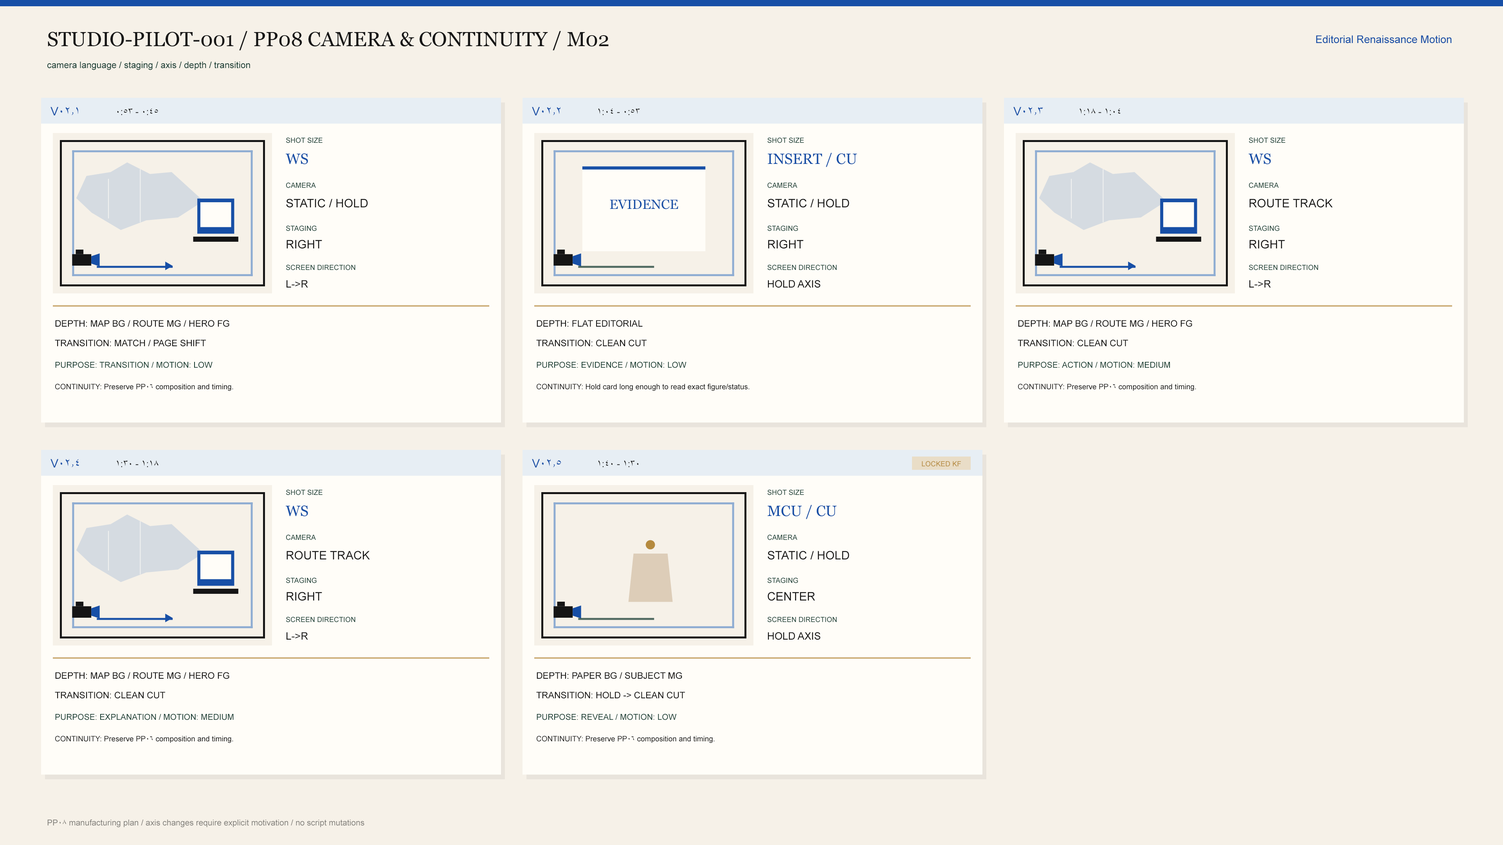
<style>
.page{position:relative;width:1503px;height:845px;background:#f6f1e8}
.page>*{position:absolute;margin:0}
.t1{font:20.3px "Georgia";color:#151515}
.t2{font:10.6px "ArialMT";color:#174fa6}
.t3{font:9px "ArialMT";color:#173c32}
.t4{font:11.7px "ArialMT";color:#174fa6}
.t5{font:9.4px "ArialMT";color:#151515}
.t6{font:7px "ArialMT";color:#173c32}
.t7{font:14.9px "Georgia";color:#174fa6}
.t8{font:11.7px "ArialMT";color:#151515}
.t9{font:13.3px "Georgia";color:#174fa6}
.t10{font:10.2px "ArialMT";color:#151515}
.t11{font:9px "ArialMT";color:#151515}
.t12{font:8.2px "ArialMT";color:#173c32}
.t13{font:7.4px "ArialMT";color:#151515}
.t14{font:7px "ArialMT";color:#b58a3e}
.t15{font:21.5px "ArialMT";color:#b58a3e}
.t16{font:8.2px "ArialMT";color:#817f7a}
</style>
<div class="page">
<p class="t1" style="left:48px;top:31px;width:560px;height:19px">STUDIO-PILOT-001 / PP08 CAMERA &amp; CONTINUITY / M02</p>
<p class="t2" style="left:1316px;top:35px;width:135px;height:8px">Editorial Renaissance Motion</p>
<p class="t3" style="left:47px;top:61px;width:203px;height:9px">camera language / staging / axis / depth / transition</p>
<p class="t4" style="left:50px;top:107px;width:28px;height:8px">V02.1</p>
<p class="t5" style="left:117px;top:108px;width:41px;height:7px">0:45 - 0:53</p>
<p class="t4" style="left:532px;top:107px;width:28px;height:8px">V02.2</p>
<p class="t5" style="left:598px;top:108px;width:42px;height:7px">0:53 - 1:04</p>
<p class="t4" style="left:1013px;top:107px;width:29px;height:8px">V02.3</p>
<p class="t5" style="left:1079px;top:108px;width:41px;height:7px">1:04 - 1:18</p>
<p class="t6" style="left:286px;top:137px;width:36px;height:6px">SHOT SIZE</p>
<p class="t6" style="left:767px;top:137px;width:37px;height:6px">SHOT SIZE</p>
<p class="t6" style="left:1249px;top:137px;width:36px;height:6px">SHOT SIZE</p>
<p class="t7" style="left:286px;top:153px;width:22px;height:11px">WS</p>
<p class="t7" style="left:767px;top:153px;width:90px;height:14px">INSERT / CU</p>
<p class="t7" style="left:1248px;top:153px;width:23px;height:11px">WS</p>
<p class="t6" style="left:286px;top:182px;width:30px;height:6px">CAMERA</p>
<p class="t6" style="left:767px;top:182px;width:30px;height:6px">CAMERA</p>
<p class="t6" style="left:1249px;top:182px;width:29px;height:6px">CAMERA</p>
<p class="t8" style="left:286px;top:199px;width:82px;height:9px">STATIC / HOLD</p>
<p class="t9" style="left:610px;top:200px;width:68px;height:9px">EVIDENCE</p>
<p class="t8" style="left:767px;top:199px;width:82px;height:9px">STATIC / HOLD</p>
<p class="t8" style="left:1249px;top:199px;width:83px;height:9px">ROUTE TRACK</p>
<p class="t6" style="left:286px;top:225px;width:31px;height:6px">STAGING</p>
<p class="t6" style="left:767px;top:225px;width:31px;height:6px">STAGING</p>
<p class="t6" style="left:1249px;top:225px;width:30px;height:6px">STAGING</p>
<p class="t8" style="left:286px;top:240px;width:36px;height:9px">RIGHT</p>
<p class="t8" style="left:768px;top:240px;width:35px;height:9px">RIGHT</p>
<p class="t8" style="left:1249px;top:240px;width:36px;height:9px">RIGHT</p>
<p class="t6" style="left:286px;top:265px;width:69px;height:5px">SCREEN DIRECTION</p>
<p class="t6" style="left:767px;top:265px;width:70px;height:5px">SCREEN DIRECTION</p>
<p class="t6" style="left:1249px;top:265px;width:69px;height:5px">SCREEN DIRECTION</p>
<p class="t10" style="left:286px;top:280px;width:22px;height:8px">L-&gt;R</p>
<p class="t10" style="left:768px;top:280px;width:52px;height:8px">HOLD AXIS</p>
<p class="t10" style="left:1249px;top:280px;width:22px;height:8px">L-&gt;R</p>
<p class="t11" style="left:55px;top:320px;width:174px;height:7px">DEPTH: MAP BG / ROUTE MG / HERO FG</p>
<p class="t11" style="left:536px;top:320px;width:107px;height:7px">DEPTH: FLAT EDITORIAL</p>
<p class="t11" style="left:1018px;top:320px;width:174px;height:7px">DEPTH: MAP BG / ROUTE MG / HERO FG</p>
<p class="t11" style="left:55px;top:340px;width:151px;height:7px">TRANSITION: MATCH / PAGE SHIFT</p>
<p class="t11" style="left:536px;top:340px;width:110px;height:7px">TRANSITION: CLEAN CUT</p>
<p class="t11" style="left:1017px;top:340px;width:111px;height:7px">TRANSITION: CLEAN CUT</p>
<p class="t12" style="left:55px;top:362px;width:157px;height:6px">PURPOSE: TRANSITION / MOTION: LOW</p>
<p class="t12" style="left:536px;top:362px;width:150px;height:6px">PURPOSE: EVIDENCE / MOTION: LOW</p>
<p class="t12" style="left:1018px;top:362px;width:152px;height:6px">PURPOSE: ACTION / MOTION: MEDIUM</p>
<p class="t13" style="left:55px;top:384px;width:178px;height:7px">CONTINUITY: Preserve PP06 composition and timing.</p>
<p class="t13" style="left:536px;top:384px;width:213px;height:7px">CONTINUITY: Hold card long enough to read exact figure/status.</p>
<p class="t13" style="left:1018px;top:384px;width:178px;height:7px">CONTINUITY: Preserve PP06 composition and timing.</p>
<p class="t4" style="left:50px;top:459px;width:29px;height:9px">V02.4</p>
<p class="t5" style="left:117px;top:460px;width:41px;height:7px">1:18 - 1:30</p>
<p class="t4" style="left:532px;top:459px;width:29px;height:9px">V02.5</p>
<p class="t5" style="left:598px;top:460px;width:41px;height:7px">1:30 - 1:40</p>
<p class="t14" style="left:922px;top:461px;width:39px;height:6px">LOCKED KF</p>
<p class="t6" style="left:286px;top:490px;width:36px;height:5px">SHOT SIZE</p>
<p class="t6" style="left:767px;top:490px;width:37px;height:5px">SHOT SIZE</p>
<p class="t7" style="left:286px;top:506px;width:22px;height:11px">WS</p>
<p class="t7" style="left:767px;top:505px;width:70px;height:14px">MCU / CU</p>
<p class="t6" style="left:286px;top:535px;width:30px;height:5px">CAMERA</p>
<p class="t15" style="left:645px;top:540px;width:10px;height:10px">●</p>
<p class="t6" style="left:767px;top:535px;width:30px;height:5px">CAMERA</p>
<p class="t8" style="left:286px;top:551px;width:84px;height:9px">ROUTE TRACK</p>
<p class="t8" style="left:767px;top:551px;width:82px;height:9px">STATIC / HOLD</p>
<p class="t6" style="left:286px;top:578px;width:31px;height:5px">STAGING</p>
<p class="t6" style="left:767px;top:578px;width:31px;height:5px">STAGING</p>
<p class="t8" style="left:286px;top:592px;width:36px;height:9px">RIGHT</p>
<p class="t8" style="left:767px;top:592px;width:48px;height:9px">CENTER</p>
<p class="t6" style="left:286px;top:617px;width:69px;height:6px">SCREEN DIRECTION</p>
<p class="t6" style="left:767px;top:617px;width:70px;height:6px">SCREEN DIRECTION</p>
<p class="t10" style="left:286px;top:632px;width:22px;height:8px">L-&gt;R</p>
<p class="t10" style="left:768px;top:632px;width:52px;height:8px">HOLD AXIS</p>
<p class="t11" style="left:55px;top:672px;width:174px;height:7px">DEPTH: MAP BG / ROUTE MG / HERO FG</p>
<p class="t11" style="left:536px;top:672px;width:146px;height:7px">DEPTH: PAPER BG / SUBJECT MG</p>
<p class="t11" style="left:55px;top:692px;width:110px;height:7px">TRANSITION: CLEAN CUT</p>
<p class="t11" style="left:536px;top:692px;width:149px;height:7px">TRANSITION: HOLD -&gt; CLEAN CUT</p>
<p class="t12" style="left:55px;top:714px;width:179px;height:6px">PURPOSE: EXPLANATION / MOTION: MEDIUM</p>
<p class="t12" style="left:536px;top:714px;width:140px;height:6px">PURPOSE: REVEAL / MOTION: LOW</p>
<p class="t13" style="left:55px;top:736px;width:178px;height:7px">CONTINUITY: Preserve PP06 composition and timing.</p>
<p class="t13" style="left:536px;top:736px;width:179px;height:7px">CONTINUITY: Preserve PP06 composition and timing.</p>
<p class="t16" style="left:47px;top:819px;width:317px;height:9px">PP08 manufacturing plan / axis changes require explicit motivation / no script mutations</p>
</div>
